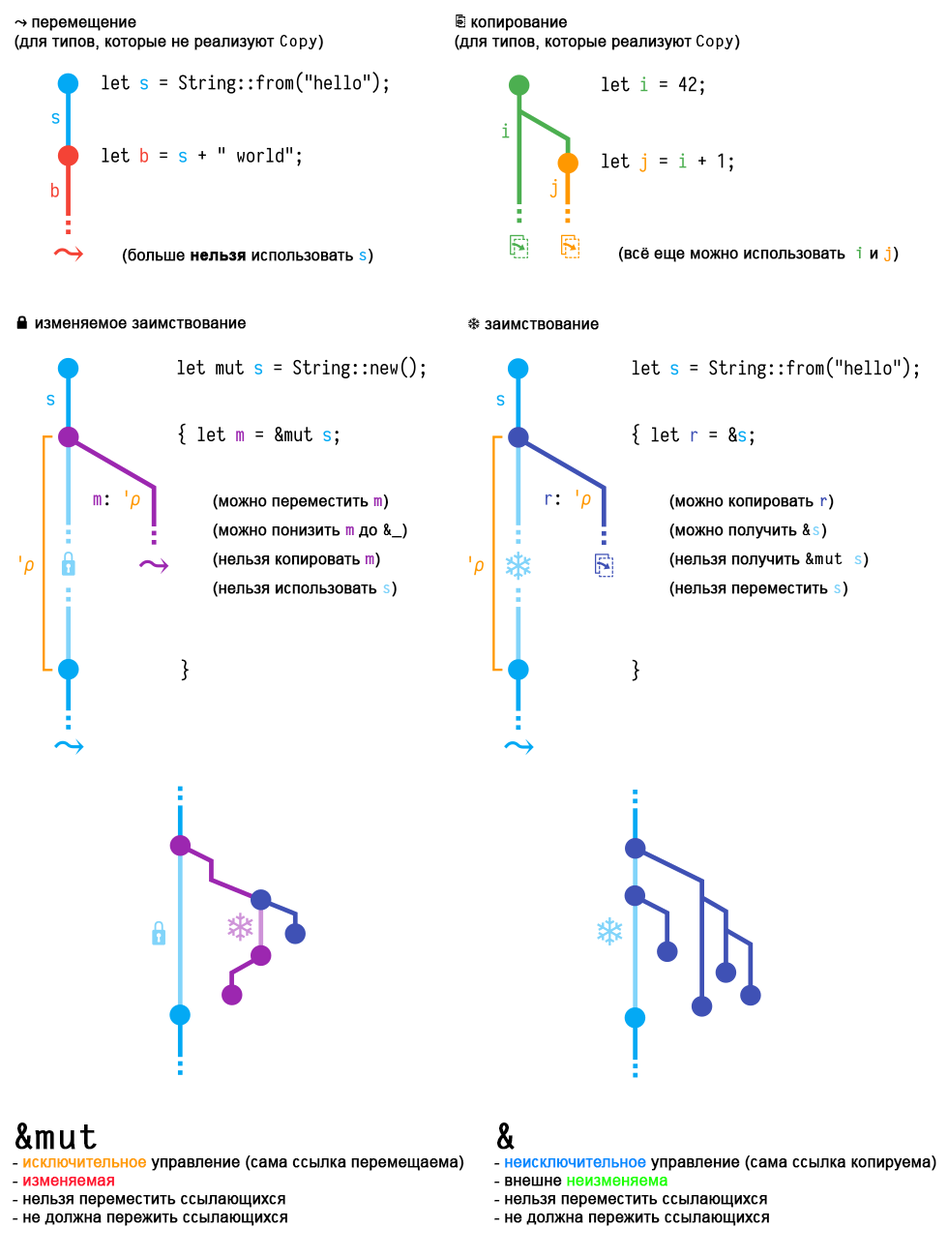
<style>
.page{position:relative;width:948px;height:1258px;background:#ffffff}
.page>*{position:absolute;margin:0}
.t1{font:15.5px "ArialMT";color:#000000;font-weight:bold}
.t2{font:15.5px "CambriaMath";color:#000000;font-weight:bold}
.t3{font:15.5px "LetterGothicStd";color:#000000;font-weight:bold}
.t4{font:15.5px "Arial-BoldMT";color:#000000;font-weight:bold}
.t5{font:15.5px "LetterGothicStd";color:#03a9f4;font-weight:bold}
.t6{font:15.5px "LetterGothicStd";color:#4caf50;font-weight:bold}
.t7{font:15.5px "LetterGothicStd";color:#ff9800;font-weight:bold}
.t8{font:15.5px "SegoeUISymbol";color:#000000;font-weight:bold}
.t9{font:15.5px/29px "ArialMT";color:#000000;font-weight:bold}
.t10{font:15.5px/29px "LetterGothicStd";color:#9c27b0;font-weight:bold}
.t11{font:15.5px/29px "LetterGothicStd";color:#000000;font-weight:bold}
.t12{font:15.5px/29px "LetterGothicStd";color:#81d4fa;font-weight:bold}
.t13{font:15.5px/29px "LetterGothicStd";color:#3f51b5;font-weight:bold}
.t14{font:34.8px "LetterGothicStd-Bold";color:#000000;font-weight:bold}
.t15{font:15.5px "ArialMT";color:#ff9c00;font-weight:bold}
.t16{font:15.5px "ArialMT";color:#ff1531;font-weight:bold}
.t17{font:15.5px "ArialMT";color:#010101;font-weight:bold}
.t18{font:15.5px "ArialMT";color:#008aff;font-weight:bold}
.t19{font:15.5px "ArialMT";color:#1eff00;font-weight:bold}
</style>
<div class="page">
<p class="t1" style="left:455px;top:15px;width:285px;height:35px"><span class="t2">⎘ </span>копирование<br>(для типов, которые реализуют <span class="t3">Copy</span>)</p>
<p class="t1" style="left:15px;top:18px;width:308px;height:32px"><span class="t2">⤳ </span>перемещение <br>(для типов, которые не реализуют <span class="t3">Copy</span>)</p>
<p class="t1" style="left:122px;top:249px;width:251px;height:15px">(больше <span class="t4">нельзя </span>использовать <span class="t5">s</span>)</p>
<p class="t1" style="left:618px;top:247px;width:281px;height:15px">(всё еще можно использовать<span class="t6"> i</span> и <span class="t7">j</span>)</p>
<p class="t1" style="left:468px;top:317px;width:131px;height:13px"><span class="t8">❄ </span>заимствование</p>
<p class="t9" style="left:213px;top:494px;width:194px;height:103px">(можно переместить <span class="t10">m</span>)<br>(можно понизить <span class="t10">m </span>до <span class="t11">&amp;_</span>)<br>(нельзя копировать <span class="t10">m</span>)<br>(нельзя использовать <span class="t12">s</span>)</p>
<p class="t9" style="left:669px;top:494px;width:200px;height:103px">(можно копировать <span class="t13">r</span>)<br>(можно получить <span class="t11">&amp;</span><span class="t12">s</span>)<br>(нельзя получить <span class="t11">&amp;mut </span><span class="t12">s</span>)<br>(нельзя переместить <span class="t12">s</span>)</p>
<p class="t1" style="left:13px;top:1122px;width:451px;height:104px"><span class="t14">&amp;mut<br></span>- <span class="t15">исключительное </span>управление (сама ссылка перемещаема)<br>-<span class="t16"> изменяемая<br></span>- нельзя переместить ссылающихся<br>- не должна пережить ссылающихся</p>
<p class="t1" style="left:494px;top:1122px;width:442px;height:104px"><span class="t14">&amp;<br></span><span class="t17">- </span><span class="t18">неисключительное </span>управление (сама ссылка копируема)<br>- внешне <span class="t19">неизменяема<br></span>- нельзя переместить ссылающихся<br>- не должна пережить ссылающихся</p>
</div>
